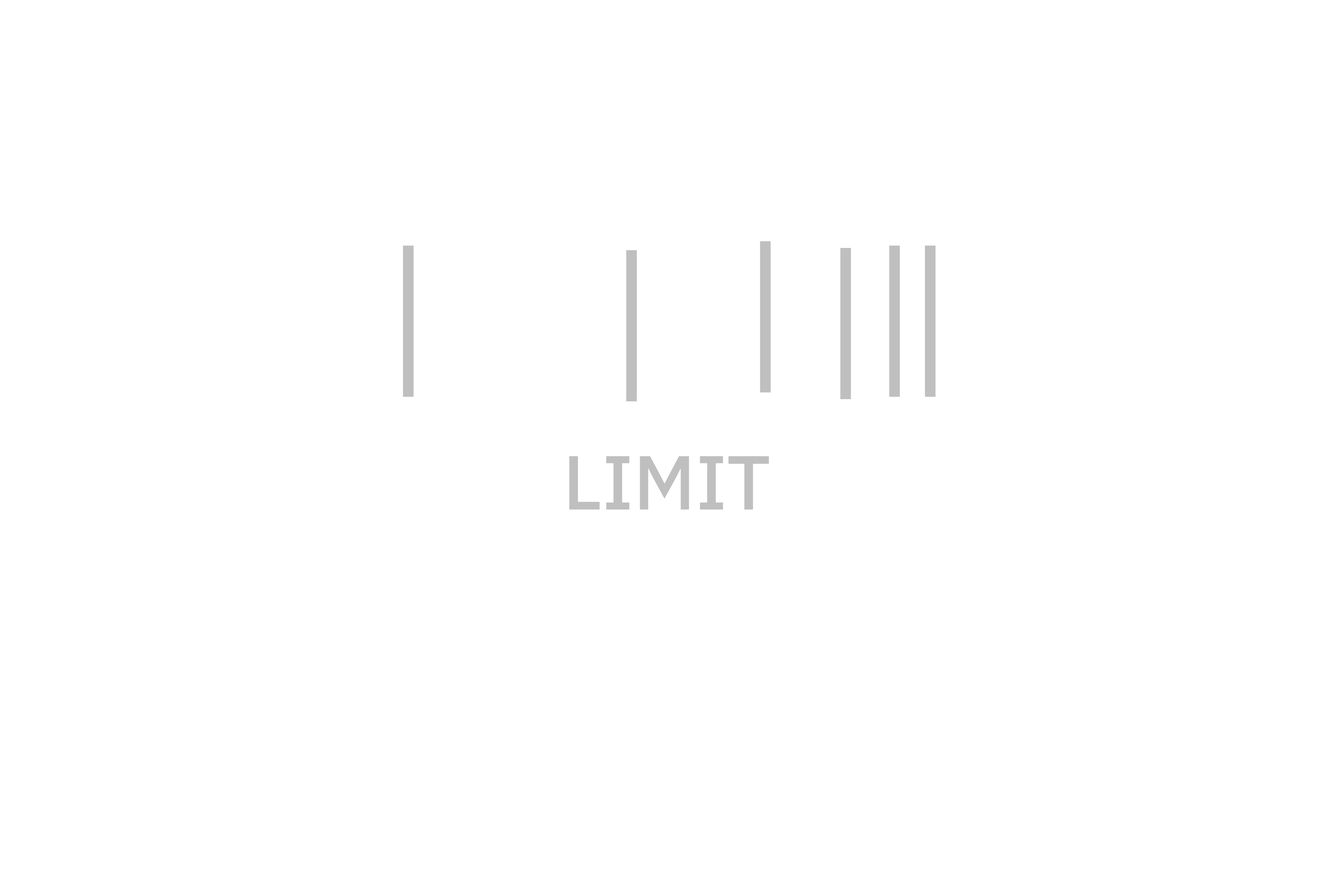
<style>
.page{position:relative;width:1337px;height:892px;background:#ffffff}
.page>*{position:absolute;margin:0}
.t1{font:76.4px "IBMPlexSans-Medium";color:#bfbfbf}
</style>
<div class="page">
<p class="t1" style="left:569px;top:456px;width:200px;height:53px">LIMIT</p>
</div>
